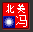
<style>
.page{position:relative;width:33px;height:32px;background:#f20000}
.page>*{position:absolute;margin:0}
.t1{font:10.4px "SimSun";color:#ffffff}
.t2{font:11.7px "SimSun";color:#ffffff}
</style>
<div class="page">
<p class="t1" style="left:6px;top:4px;width:19px;height:9px">北美</p>
<p class="t2" style="left:16px;top:15px;width:11px;height:12px">冯</p>
</div>
